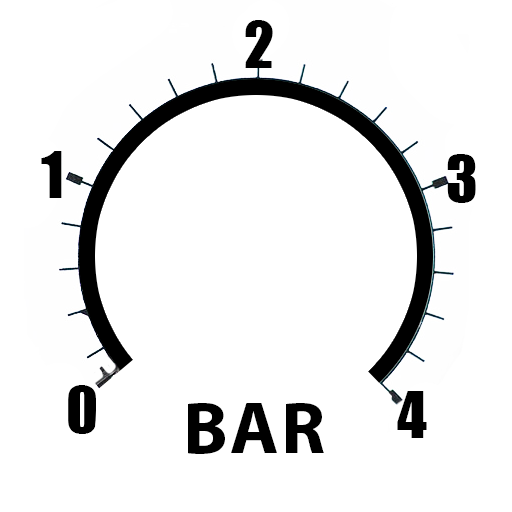
<style>
.page{position:relative;width:512px;height:512px;background:#ffffff}
.page>*{position:absolute;margin:0}
.t1{font:59.6px "Impact";letter-spacing:0.025em;color:#000000}
.t2{font:73.6px "MyriadPro-Bold";letter-spacing:0.025em;color:#000000}
</style>
<div class="page">
<p class="t1" style="left:245px;top:20px;width:28px;height:48px">2</p>
<p class="t1" style="left:41px;top:151px;width:21px;height:47px">1</p>
<p class="t1" style="left:447px;top:154px;width:29px;height:49px">3</p>
<p class="t1" style="left:68px;top:385px;width:28px;height:49px">0</p>
<p class="t1" style="left:397px;top:391px;width:30px;height:47px">4</p>
<p class="t2" style="left:188px;top:403px;width:136px;height:51px">BAR</p>
</div>
